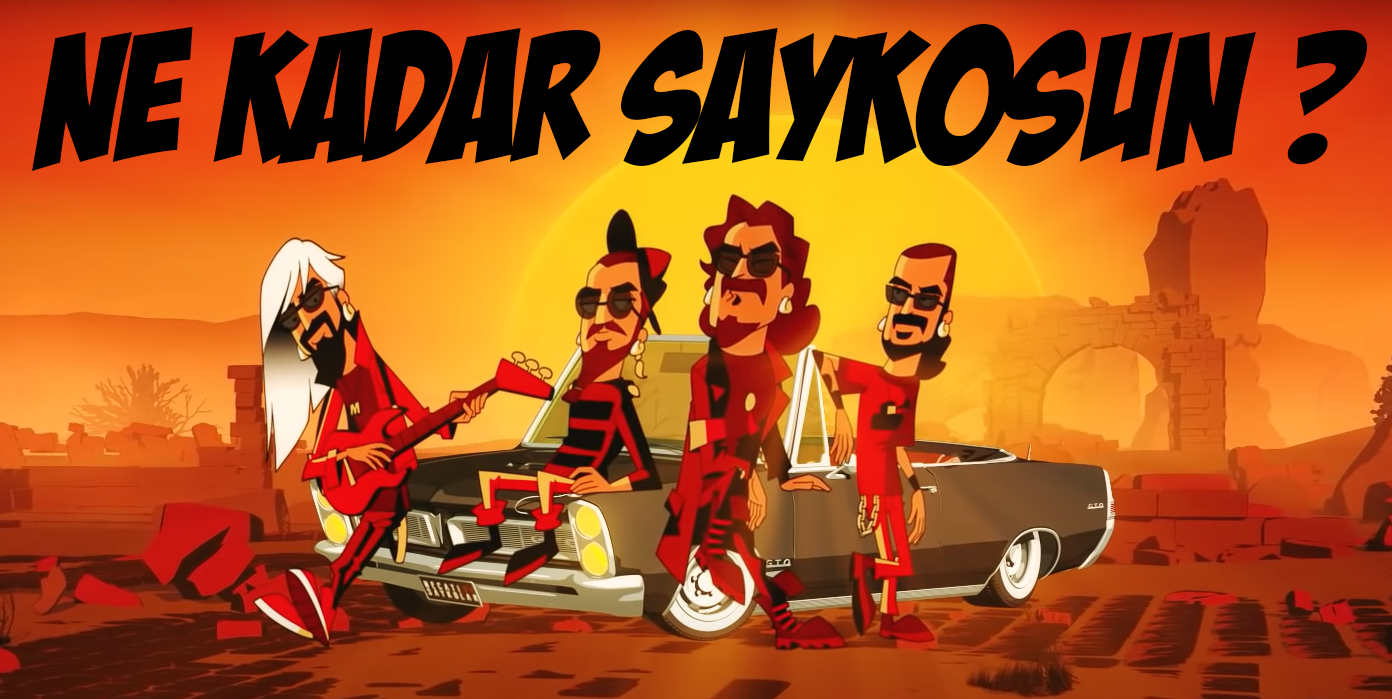
<style>
.page{position:relative;width:1392px;height:699px}
.page>*{position:absolute;margin:0}
.t1{font:180.5px "BadaBoomBB";color:#000000}
</style>
<div class="page">
<p class="t1" style="left:31px;top:24px;width:1337px;height:147px">Ne kadar saykosun ?</p>
</div>
